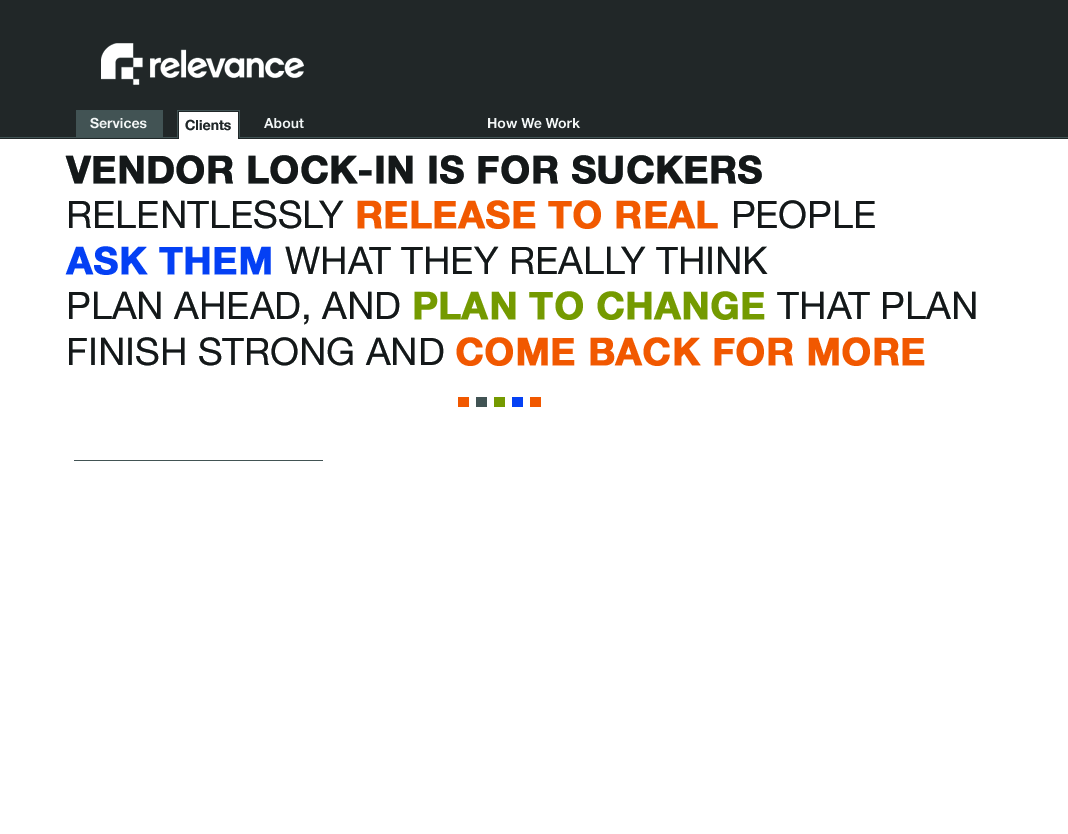
<style>
.page{position:relative;width:1068px;height:834px;background:#ffffff}
.page>*{position:absolute;margin:0}
.t1{font:14px "HelveticaNeue-Bold";color:#f2f5f5}
.t2{font:14px "HelveticaNeue-Bold";color:#202728}
.t3{font:38px "HelveticaNeue";color:#141819;text-transform:uppercase}
.t4{font:38px "HelveticaNeue-Bold";color:#141819;text-transform:uppercase;font-weight:bold}
.t5{font:38px "HelveticaNeue-Bold";color:#f15900;text-transform:uppercase;font-weight:bold}
.t6{font:38px "HelveticaNeue-Bold";color:#0440f4;text-transform:uppercase;font-weight:bold}
.t7{font:38px "HelveticaNeue-Bold";color:#749a00;text-transform:uppercase;font-weight:bold}
.t8{font:38px "HelveticaNeue-Bold";color:#f15800;text-transform:uppercase;font-weight:bold}
</style>
<div class="page">
<p class="t1" style="left:90px;top:117px;width:57px;height:12px">Services</p>
<p class="t2" style="left:185px;top:119px;width:46px;height:12px">Clients</p>
<p class="t1" style="left:264px;top:118px;width:40px;height:11px">About</p>
<p class="t1" style="left:488px;top:118px;width:93px;height:11px">How We Work</p>
<p class="t3" style="left:65px;top:155px;width:911px;height:211px"><span class="t4">Vendor lock-in is for suckers<br></span>Relentlessly <span class="t5">release to real </span>people<br><span class="t6">Ask them </span>what they really think<br>Plan ahead, and <span class="t7">plan to change </span>that plan<br>Finish strong and <span class="t8">come back for more</span></p>
</div>
